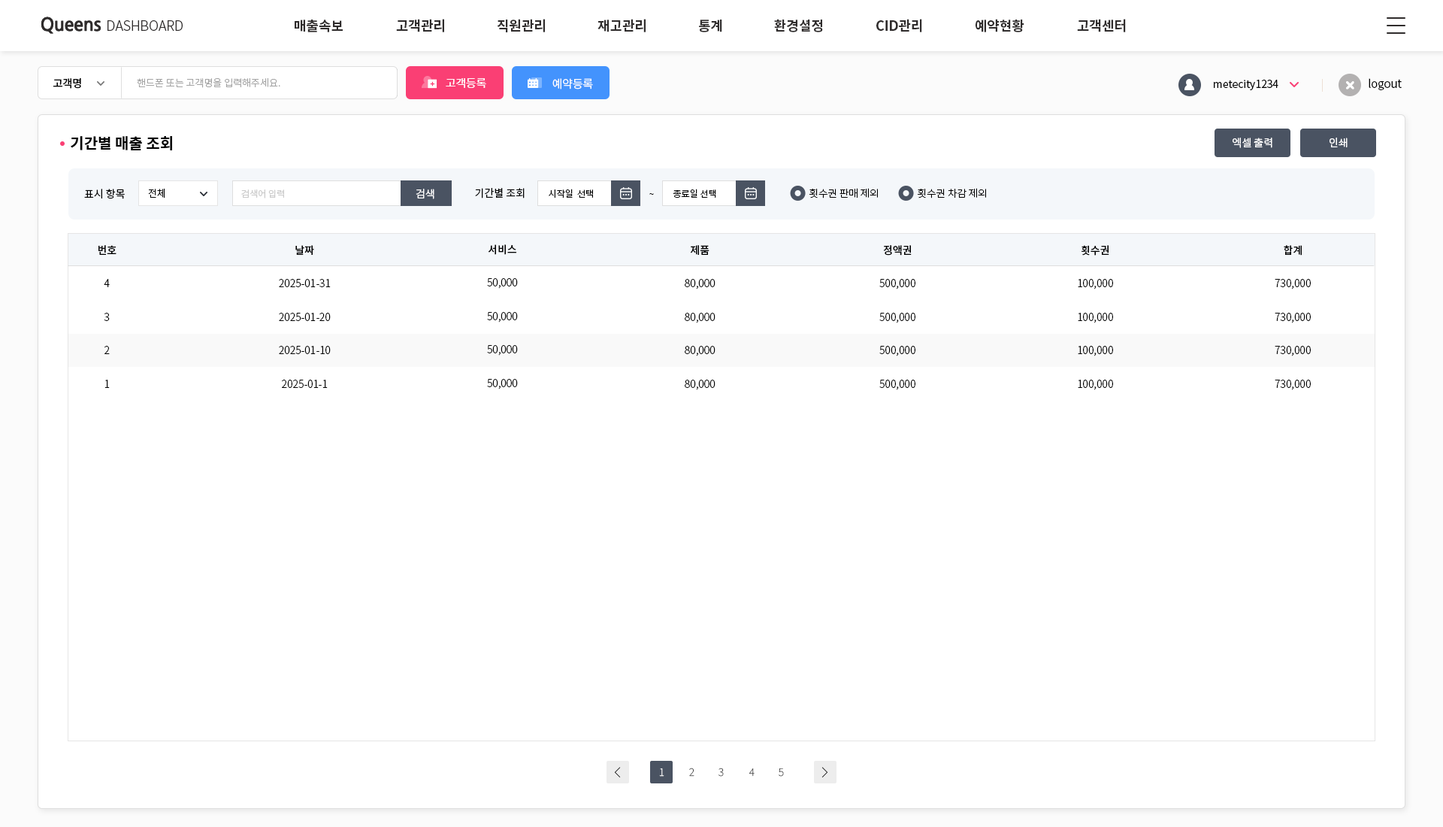
<style>
.page{position:relative;width:1443px;height:827px;background:#ffffff}
.page>*{position:absolute;margin:0}
.t1{font:18px "NanumGothicBold";letter-spacing:-0.025em;color:#2f2c2c}
.t2{font:18px "NanumGothicBold";letter-spacing:-0.025em;color:#2f2c2c;text-transform:uppercase}
.t3{font:13.5px "NotoSansCJKkr-Light";letter-spacing:-0.01em;color:#2f2c2c;text-transform:uppercase}
.t4{font:13.5px "NotoSansCJKkr-Bold";color:#2f2c2c}
.t5{font:9.8px "NotoSansCJKkr-Light";color:#a3a3a3}
.t6{font:10.5px "NotoSansCJKkr-Medium";color:#000000}
.t7{font:11.3px "NotoSansCJKkr-Regular";letter-spacing:-0.01em;color:#ffffff}
.t8{font:11.3px "NotoSansCJKkr-Regular";letter-spacing:-0.01em;color:#fffefe}
.t9{font:10.5px "NotoSansCJKkr-DemiLight";color:#000000}
.t10{font:11.3px "NotoSansCJKkr-DemiLight";color:#000000}
.t11{font:15px "NotoSansCJKkr-Bold";color:#000000}
.t12{font:10.5px "NotoSansCJKkr-Regular";color:#ffffff}
.t13{font:9.8px "NotoSansCJKkr-Light";color:#000000;text-transform:uppercase}
.t14{font:9px "NotoSansCJKkr-DemiLight";color:#cacaca}
.t15{font:10.5px "NotoSansCJKkr-DemiLight";color:#ffffff}
.t16{font:9px "NotoSansCJKkr-DemiLight";color:#000000}
.t17{font:10px "NotoSansCJKkr-Light";letter-spacing:-0.025em;color:#000000;text-transform:uppercase;scale:1.05 1}
.t18{font:10.5px/33.4px "NotoSansCJKkr-Light";color:#000000}
.t19{font:10.5px/33.4px "NotoSansCJKkr-Medium";color:#000000}
.t20{font:10.5px "NotoSansKR-Thin";color:#ffffff}
.t21{font:10.5px "NotoSansKR-Thin";color:#454545}
</style>
<div class="page">
<p class="t1" style="left:41px;top:17px;width:60px;height:17px"><span class="t2">q</span>ueens</p>
<p class="t3" style="left:107px;top:20px;width:76px;height:11px">Dashboard</p>
<p class="t4" style="left:295px;top:20px;width:48px;height:12px">매출속보</p>
<p class="t4" style="left:396px;top:19px;width:48px;height:13px">고객관리</p>
<p class="t4" style="left:497px;top:19px;width:48px;height:13px">직원관리</p>
<p class="t4" style="left:597px;top:19px;width:48px;height:13px">재고관리</p>
<p class="t4" style="left:699px;top:20px;width:23px;height:12px">통계</p>
<p class="t4" style="left:774px;top:19px;width:49px;height:13px">환경셜정</p>
<p class="t4" style="left:876px;top:19px;width:46px;height:13px">CID관리</p>
<p class="t4" style="left:975px;top:19px;width:49px;height:13px">예약현황</p>
<p class="t4" style="left:1077px;top:19px;width:49px;height:13px">고객센터</p>
<p class="t5" style="left:137px;top:77px;width:143px;height:11px">핸드폰 또는 고객명을 입력해주세요.</p>
<p class="t6" style="left:53px;top:78px;width:28px;height:11px">고객명</p>
<p class="t7" style="left:446px;top:78px;width:40px;height:10px">고객등록</p>
<p class="t8" style="left:552px;top:78px;width:41px;height:11px">예약등록</p>
<p class="t9" style="left:1214px;top:80px;width:64px;height:10px">metecity1234</p>
<p class="t10" style="left:1368px;top:78px;width:33px;height:12px">logout</p>
<p class="t11" style="left:71px;top:136px;width:101px;height:14px">기간별 매출 조회</p>
<p class="t12" style="left:1232px;top:138px;width:40px;height:10px">엑셀 출력</p>
<p class="t12" style="left:1329px;top:138px;width:18px;height:9px">인쇄</p>
<p class="t9" style="left:84px;top:189px;width:41px;height:10px">표시 항목</p>
<p class="t13" style="left:148px;top:188px;width:17px;height:10px">전체</p>
<p class="t14" style="left:241px;top:189px;width:43px;height:9px">검색어 입력</p>
<p class="t15" style="left:416px;top:189px;width:18px;height:10px">검색</p>
<p class="t9" style="left:475px;top:188px;width:49px;height:10px">기간별 조회</p>
<p class="t16" style="left:549px;top:189px;width:44px;height:9px">시작일  선택</p>
<p class="t16" style="left:649px;top:193px;width:5px;height:2px">~</p>
<p class="t16" style="left:673px;top:189px;width:43px;height:9px">종료일 선택</p>
<p class="t17" style="left:809px;top:188px;width:69px;height:10px">횟수권 판매 제외</p>
<p class="t17" style="left:917px;top:188px;width:69px;height:10px">횟수권 차감 제외</p>
<p class="t18" style="left:98px;top:245px;width:18px;height:143px;text-align:center"><span class="t19">번호<br></span>4<br>3<br>2<br>1</p>
<p class="t18" style="left:279px;top:245px;width:52px;height:143px;text-align:center"><span class="t19">날짜<br></span>2025-01-31<br>2025-01-20<br>2025-01-10<br>2025-01-1</p>
<p class="t18" style="left:487px;top:244px;width:31px;height:145px;text-align:center"><span class="t19">서비스<br></span>50,000<br>50,000<br>50,000<br>50,000</p>
<p class="t18" style="left:685px;top:245px;width:30px;height:145px;text-align:center"><span class="t19">제품<br></span>80,000<br>80,000<br>80,000<br>80,000</p>
<p class="t18" style="left:879px;top:245px;width:36px;height:145px;text-align:center"><span class="t19">정액권<br></span>500,000<br>500,000<br>500,000<br>500,000</p>
<p class="t18" style="left:1078px;top:245px;width:35px;height:145px;text-align:center"><span class="t19">횟수권<br></span>100,000<br>100,000<br>100,000<br>100,000</p>
<p class="t18" style="left:1274px;top:245px;width:36px;height:145px;text-align:center"><span class="t19">합계<br></span>730,000<br>730,000<br>730,000<br>730,000</p>
<p class="t20" style="left:659px;top:768px;width:5px;height:8px">1</p>
<p class="t21" style="left:689px;top:767px;width:5px;height:9px">2</p>
<p class="t21" style="left:718px;top:767px;width:6px;height:9px">3</p>
<p class="t21" style="left:748px;top:768px;width:6px;height:8px">4</p>
<p class="t21" style="left:778px;top:768px;width:6px;height:8px">5</p>
</div>
